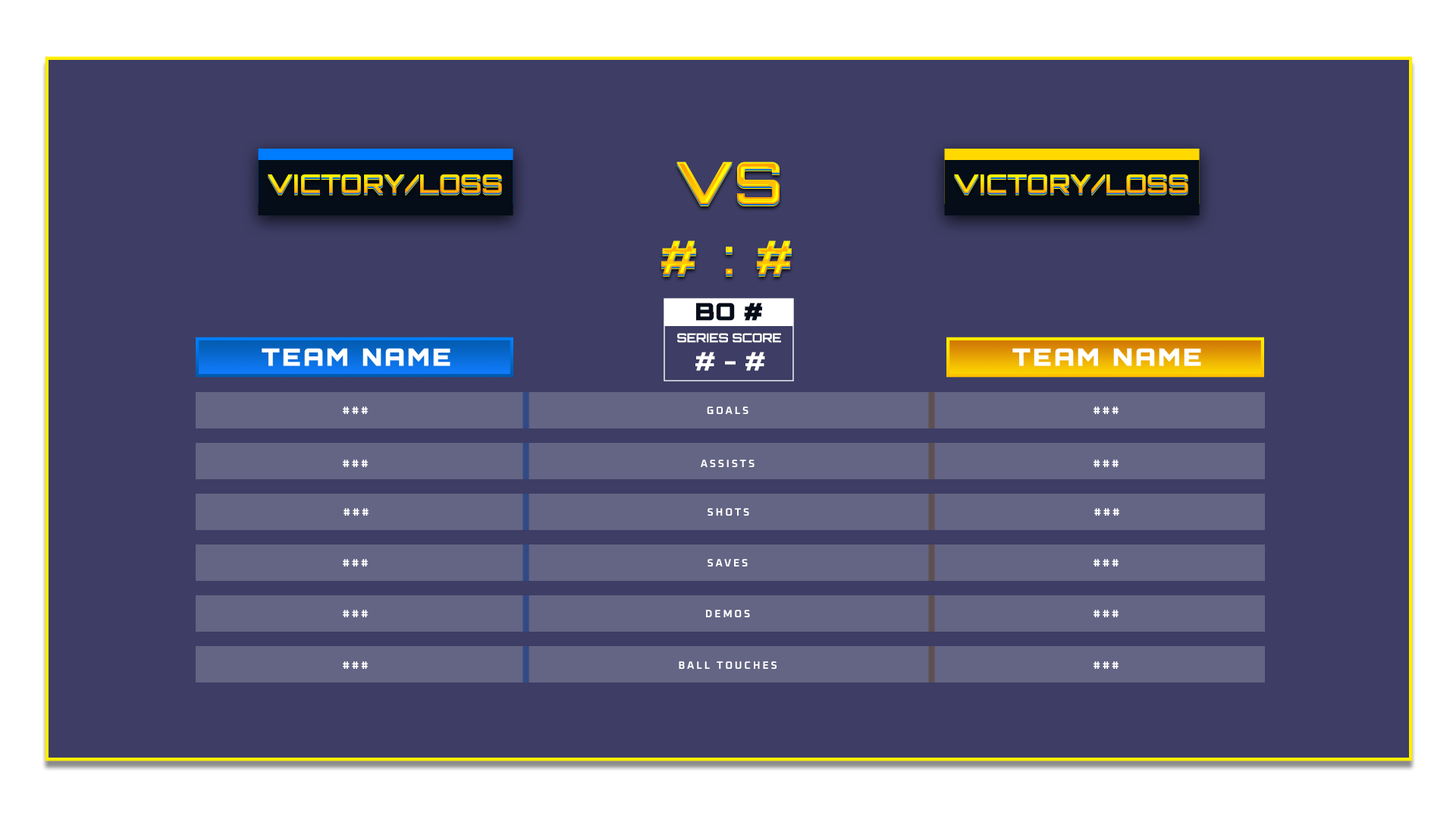
<style>
.page{position:relative;width:1456px;height:819px;background:#3d3d65}
.page>*{position:absolute;margin:0}
.t1{font:57px "Orbitron-Medium";font-weight:bold}
.t2{font:25.2px "Orbitron-Medium";font-weight:bold}
.t3{font:45.7px "Orbitron-Medium";font-weight:bold}
.t4{font:23.6px "Orbitron-Black";color:#040d18;font-weight:bold}
.t5{font:11.8px "Orbitron-Medium";color:#ffffff;font-weight:bold}
.t6{font:23.6px "Orbitron-Black";letter-spacing:0.1em;color:#ffffff;font-weight:bold}
.t7{font:24.9px "Orbitron-Medium";color:#ffffff;font-weight:bold}
.t8{font:10.5px "OxaniumRoman-Bold";letter-spacing:0.2em;color:#ffffff;text-transform:uppercase;font-weight:bold}
</style>
<div class="page">
<p class="t1" style="left:676px;top:162px;width:104px;height:42px">VS</p>
<p class="t2" style="left:268px;top:174px;width:234px;height:19px">VICTORY/LOSS</p>
<p class="t2" style="left:954px;top:174px;width:234px;height:19px">VICTORY/LOSS</p>
<p class="t3" style="left:661px;top:240px;width:35px;height:35px">#</p>
<p class="t3" style="left:757px;top:240px;width:35px;height:35px">#</p>
<p class="t3" style="left:726px;top:246px;width:7px;height:29px">:</p>
<p class="t4" style="left:696px;top:303px;width:66px;height:18px">BO #</p>
<p class="t5" style="left:677px;top:333px;width:104px;height:10px">SERIES SCORE</p>
<p class="t6" style="left:262px;top:348px;width:188px;height:18px">TEAM NAME</p>
<p class="t7" style="left:695px;top:352px;width:70px;height:19px"># - #</p>
<p class="t6" style="left:1012px;top:348px;width:189px;height:18px">TEAM NAME</p>
<p class="t8" style="left:343px;top:406px;width:25px;height:8px">###</p>
<p class="t8" style="left:707px;top:406px;width:41px;height:8px">Goals</p>
<p class="t8" style="left:1094px;top:406px;width:25px;height:8px">###</p>
<p class="t8" style="left:343px;top:460px;width:25px;height:7px">###</p>
<p class="t8" style="left:701px;top:460px;width:54px;height:7px">Assists</p>
<p class="t8" style="left:1094px;top:460px;width:25px;height:7px">###</p>
<p class="t8" style="left:344px;top:508px;width:25px;height:8px">###</p>
<p class="t8" style="left:708px;top:508px;width:41px;height:8px">Shots</p>
<p class="t8" style="left:1094px;top:508px;width:25px;height:8px">###</p>
<p class="t8" style="left:343px;top:559px;width:25px;height:7px">###</p>
<p class="t8" style="left:708px;top:559px;width:40px;height:7px">Saves</p>
<p class="t8" style="left:1094px;top:559px;width:25px;height:7px">###</p>
<p class="t8" style="left:343px;top:610px;width:25px;height:7px">###</p>
<p class="t8" style="left:706px;top:610px;width:44px;height:7px">Demos</p>
<p class="t8" style="left:1094px;top:610px;width:25px;height:7px">###</p>
<p class="t8" style="left:343px;top:661px;width:25px;height:8px">###</p>
<p class="t8" style="left:679px;top:661px;width:98px;height:8px">Ball Touches</p>
<p class="t8" style="left:1094px;top:661px;width:25px;height:8px">###</p>
</div>
